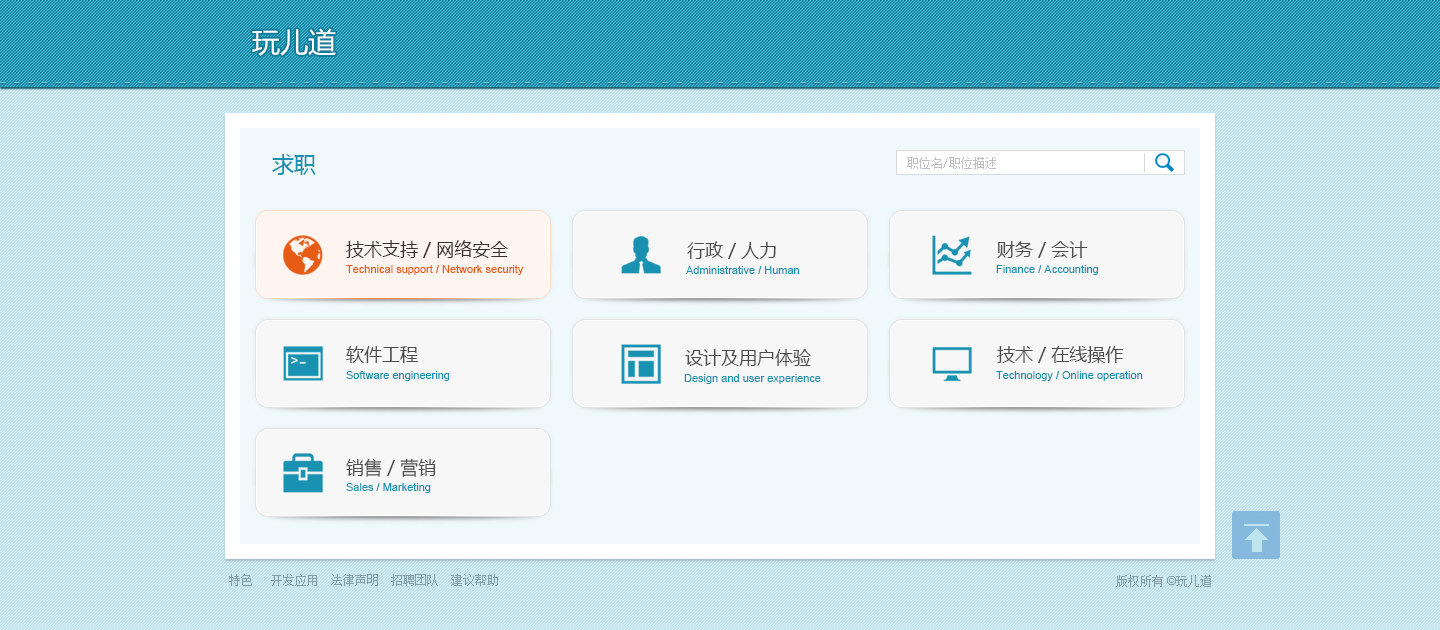
<style>
.page{position:relative;width:1440px;height:630px;background:#bfe4ed}
.page>*{position:absolute;margin:0}
.t1{font:28px "MicrosoftYaHei";color:#ffffff}
.t2{font:22px "MicrosoftYaHei";color:#1992b1}
.t3{font:12px "SimSun";color:#bfbfbf}
.t4{font:18px "MicrosoftYaHei";color:#333333}
.t5{font:18px "MicrosoftYaHei";color:#4d4d4d}
.t6{font:11px "ArialMT";color:#e65c17}
.t7{font:11px "ArialMT";color:#1992b1}
.t8{font:12px "SimSun";color:#849fa6}
.t9{font:12px "ArialMT";color:#849fa6}
</style>
<div class="page">
<p class="t1" style="left:252px;top:28px;width:84px;height:28px">玩儿道</p>
<p class="t2" style="left:272px;top:154px;width:44px;height:21px">求职</p>
<p class="t3" style="left:907px;top:157px;width:89px;height:12px">职位名/职位描述</p>
<p class="t4" style="left:346px;top:240px;width:162px;height:18px">技术支持 / 网络安全</p>
<p class="t5" style="left:687px;top:241px;width:89px;height:18px">行政 / 人力</p>
<p class="t5" style="left:997px;top:241px;width:91px;height:17px">财务 / 会计</p>
<p class="t6" style="left:346px;top:265px;width:178px;height:10px">Technical support / Network security</p>
<p class="t7" style="left:686px;top:266px;width:113px;height:8px">Administrative / Human</p>
<p class="t7" style="left:996px;top:265px;width:102px;height:10px">Finance / Accounting</p>
<p class="t5" style="left:346px;top:346px;width:72px;height:17px">软件工程</p>
<p class="t5" style="left:685px;top:349px;width:126px;height:17px">设计及用户体验</p>
<p class="t5" style="left:997px;top:346px;width:127px;height:17px">技术 / 在线操作</p>
<p class="t7" style="left:346px;top:371px;width:104px;height:10px">Software engineering</p>
<p class="t7" style="left:684px;top:374px;width:137px;height:10px">Design and user experience</p>
<p class="t7" style="left:996px;top:371px;width:147px;height:10px">Technology / Online operation</p>
<p class="t5" style="left:346px;top:458px;width:90px;height:19px">销售 / 营销</p>
<p class="t7" style="left:346px;top:483px;width:85px;height:10px">Sales / Marketing</p>
<p class="t8" style="left:229px;top:574px;width:269px;height:12px">特色   开发应用  法律声明  招聘团队  建议帮助</p>
<p class="t8" style="left:1116px;top:575px;width:95px;height:12px">版权所有<span class="t9"> ©</span>玩儿道</p>
</div>
